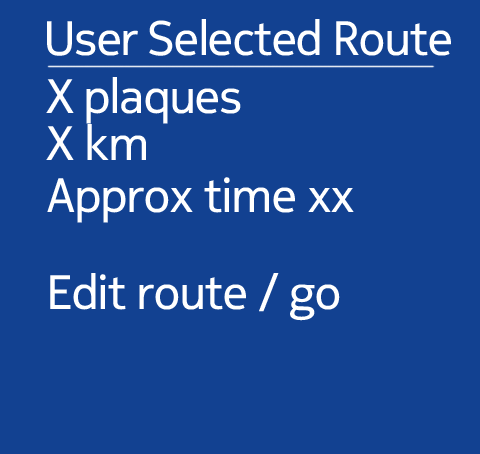
<style>
.page{position:relative;width:480px;height:454px;background:#124191}
.page>*{position:absolute;margin:0}
.t1{font:48px "NokiaPureHeadline-Regular";color:#ffffff}
.t2{font:48px "NokiaPureHeadline-Regular";letter-spacing:0.005em;color:#ffffff}
</style>
<div class="page">
<p class="t1" style="left:47px;top:19px;width:404px;height:37px">User Selected Route</p>
<p class="t1" style="left:46px;top:77px;width:195px;height:47px">X plaques</p>
<p class="t2" style="left:46px;top:124px;width:100px;height:36px">X km</p>
<p class="t2" style="left:47px;top:177px;width:307px;height:46px">Approx time xx</p>
<p class="t2" style="left:50px;top:273px;width:290px;height:48px">Edit route / go</p>
</div>
